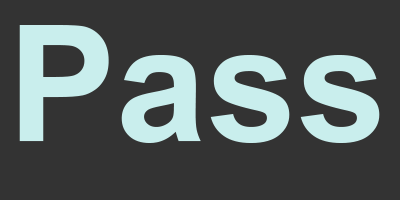
<style>
.page{position:relative;width:400px;height:200px;background:#333333}
.page>*{position:absolute;margin:0}
.t1{font:162.4px "Arial-BoldMT";color:#c9eeed}
</style>
<div class="page">
<p class="t1" style="left:19px;top:25px;width:361px;height:118px">Pass</p>
</div>
